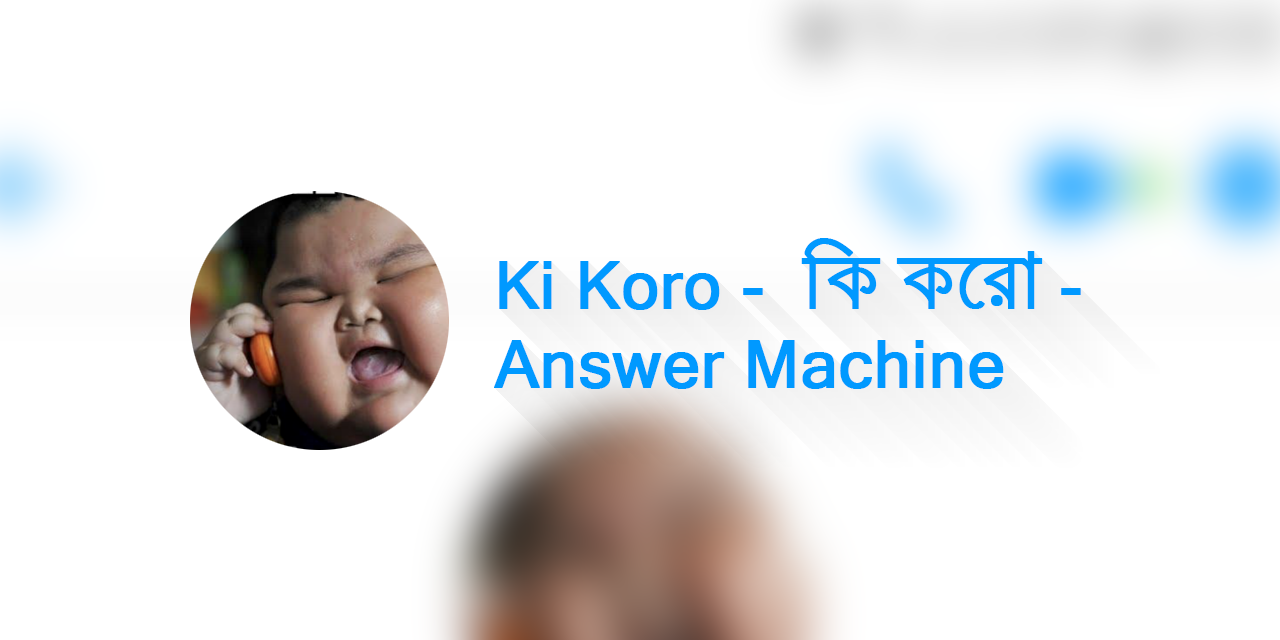
<style>
.page{position:relative;width:1280px;height:640px;background:#ffffff}
.page>*{position:absolute;margin:0}
.t1{font:65.9px "MicrosoftSansSerif";color:#0099ff;font-weight:bold}
.t2{font:65.9px "SiyamRupaliANSI";color:#0099ff;font-weight:bold}
</style>
<div class="page">
<p class="t1" style="left:494px;top:238px;width:587px;height:151px">Ki Koro - <span class="t2"> wK K‡iv</span> - <br>Answer Machine</p>
</div>
